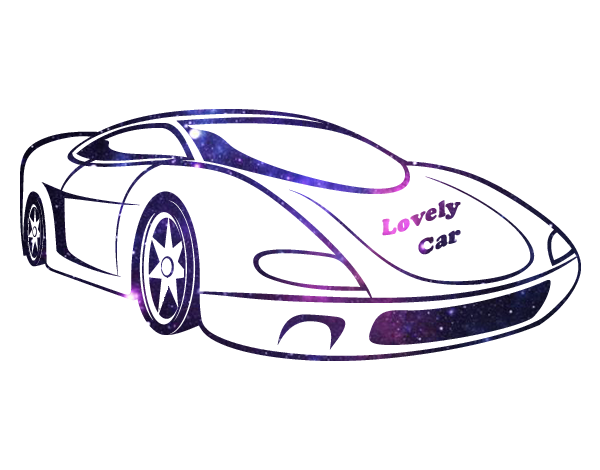
<style>
.page{position:relative;width:600px;height:470px;background:#ffffff}
.page>*{position:absolute;margin:0}
.t1{font:23.7px "CooperBlack"}
</style>
<div class="page">
<p class="t1" style="left:382px;top:200px;width:79px;height:36px">Lovely</p>
<p class="t1" style="left:418px;top:230px;width:43px;height:25px">Car</p>
</div>
